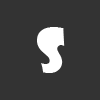
<style>
.page{position:relative;width:100px;height:100px;background:#333333}
.page>*{position:absolute;margin:0}
.t1{font:58.3px "ShowcardGothic-Reg";color:#ffffff}
</style>
<div class="page">
<p class="t1" style="left:37px;top:27px;width:28px;height:46px">s</p>
</div>
